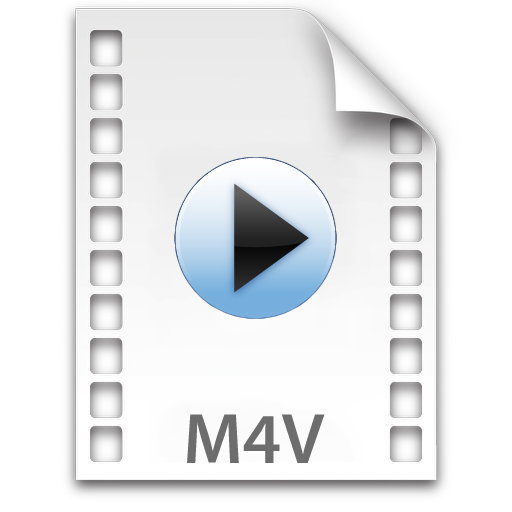
<style>
.page{position:relative;width:512px;height:512px;background:#ffffff}
.page>*{position:absolute;margin:0}
.t1{font:72px "MyriadPro-Semibold";color:#6e6d6d}
</style>
<div class="page">
<p class="t1" style="left:187px;top:414px;width:138px;height:49px">M4V</p>
</div>
